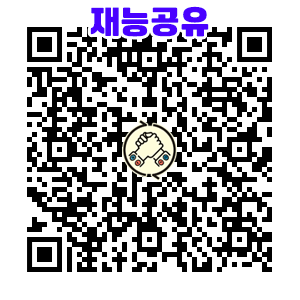
<style>
.page{position:relative;width:300px;height:300px;background:#ffffff}
.page>*{position:absolute;margin:0}
.t1{font:30px "YoonMeolijeongche2N";letter-spacing:0.04em;color:#4901ff}
</style>
<div class="page">
<p class="t1" style="left:90px;top:6px;width:119px;height:31px">재능공유</p>
</div>
